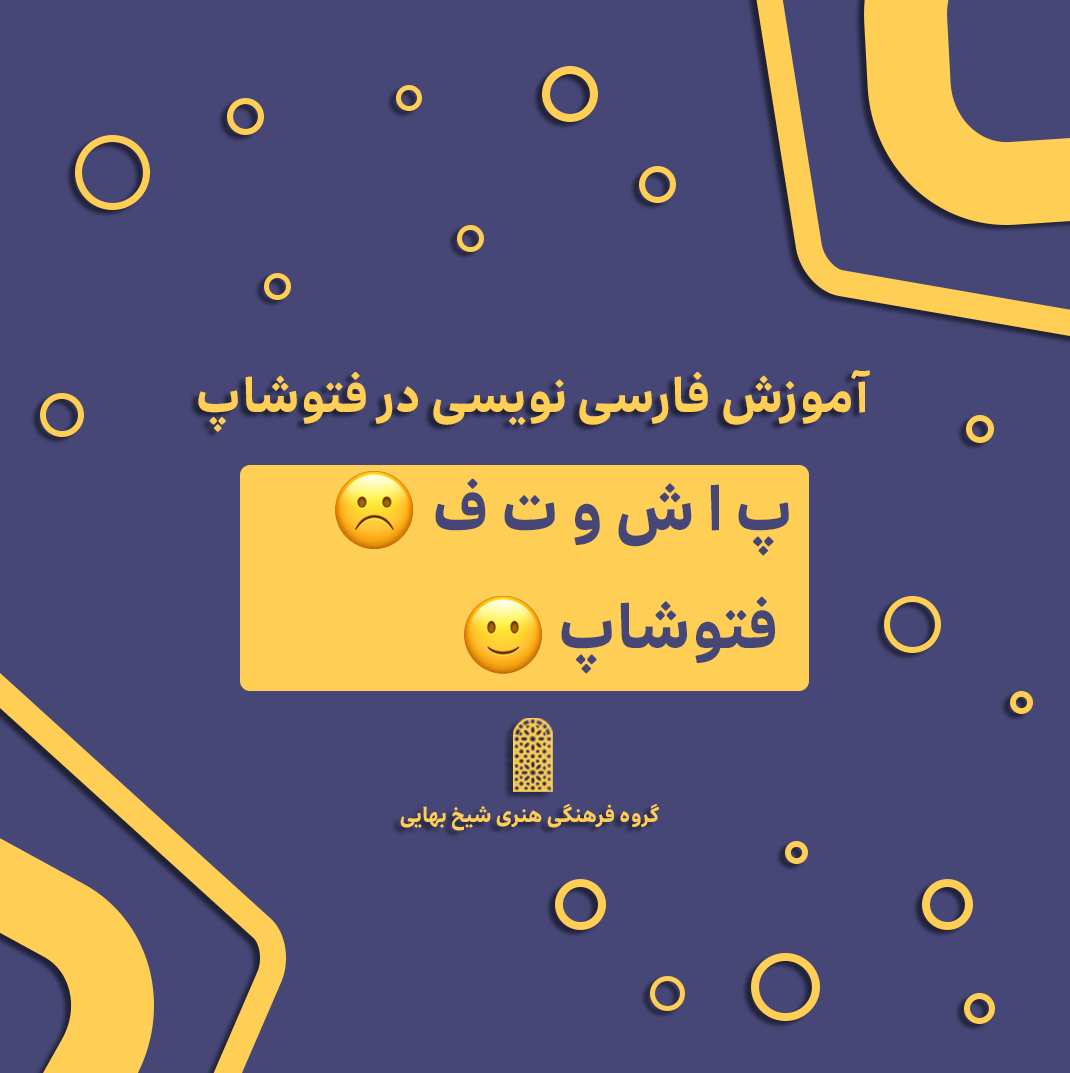
<style>
.page{position:relative;width:1070px;height:1073px;background:#464777}
.page>*{position:absolute;margin:0}
.t1{font:46px "Irancell-Bold";color:#ffce55}
.t2{font:59px "Irancell-Bold";color:#464777}
.t3{font:20px "Irancell-Bold";color:#ffce55}
</style>
<div class="page">
<p class="t1" style="left:198px;top:370px;width:672px;height:62px">آموزش فارسی نویسی در فتوشاپ</p>
<p class="t2" style="left:435px;top:478px;width:354px;height:78px">پ ا ش و ت ف</p>
<p class="t2" style="left:561px;top:596px;width:214px;height:78px">فتوشاپ</p>
<p class="t3" style="left:400px;top:803px;width:260px;height:28px">گروه فرهنگی هنری شیخ بهایی</p>
</div>
